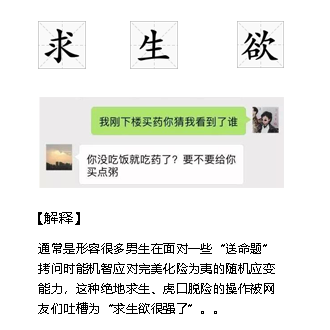
<style>
.page{position:relative;width:330px;height:330px;background:#ffffff}
.page>*{position:absolute;margin:0}
.t1{font:14px "MicrosoftYaHei";letter-spacing:0.04em;color:#000000}
.t2{font:12px/24px "MicrosoftYaHei";letter-spacing:0.04em;color:#000000}
</style>
<div class="page">
<p class="t1" style="left:38px;top:212px;width:42px;height:13px">【解释】</p>
<p class="t2" style="left:38px;top:243px;width:237px;height:71px">通常是形容很多男生在面对一些“送命题”<br>拷问时能机智应对完美化险为夷的随机应变<br>能力，这种绝地求生、虎口脱险的操作被网<br>友们吐槽为“求生欲很强了”。。</p>
</div>
